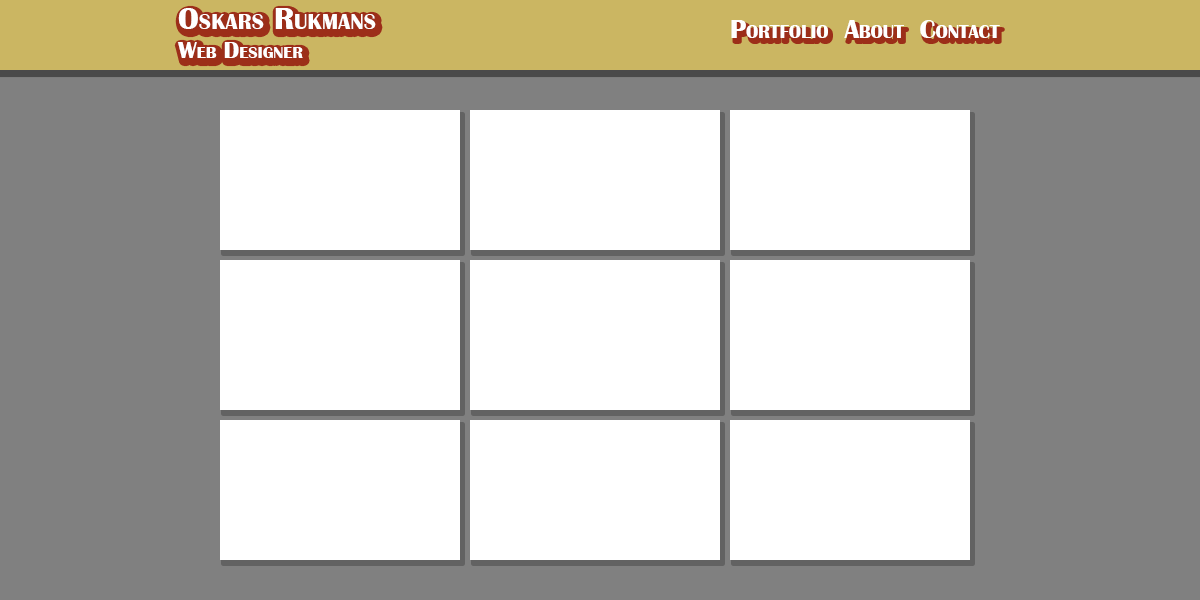
<style>
.page{position:relative;width:1200px;height:600px;background:#ffffff}
.page>*{position:absolute;margin:0}
.t1{font:32px "BritannicBold";color:#ffffff;font-variant:small-caps}
.t2{font:24px "BritannicBold";color:#ffffff;font-variant:small-caps}
.t3{font:26.7px "BritannicBold";color:#ffffff;font-variant:small-caps}
</style>
<div class="page">
<p class="t1" style="left:177px;top:8px;width:199px;height:50px;text-align:right">Oskars Rukmans <br><span class="t2">Web Designer</span></p>
<p class="t3" style="left:731px;top:20px;width:269px;height:18px">Portfolio  About  Contact</p>
</div>
